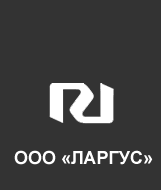
<style>
.page{position:relative;width:161px;height:190px;background:#333333}
.page>*{position:absolute;margin:0}
.t1{font:18px "Arial-BoldMT";color:#ffffff}
</style>
<div class="page">
<p class="t1" style="left:14px;top:150px;width:139px;height:15px">ООО «ЛАРГУС»</p>
</div>
